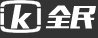
<style>
.page{position:relative;width:98px;height:38px;background:#333333}
.page>*{position:absolute;margin:0}
.t1{font:26px "MF-LiHei(Noncommercial)-Regular";color:#ffffff;font-style:italic}
.t2{font:24px "MF-LiHei(Noncommercial)-Regular";color:#ffffff;font-style:italic}
</style>
<div class="page">
<p class="t1" style="left:10px;top:4px;width:22px;height:25px">k</p>
<p class="t2" style="left:45px;top:5px;width:51px;height:24px">全民</p>
</div>
